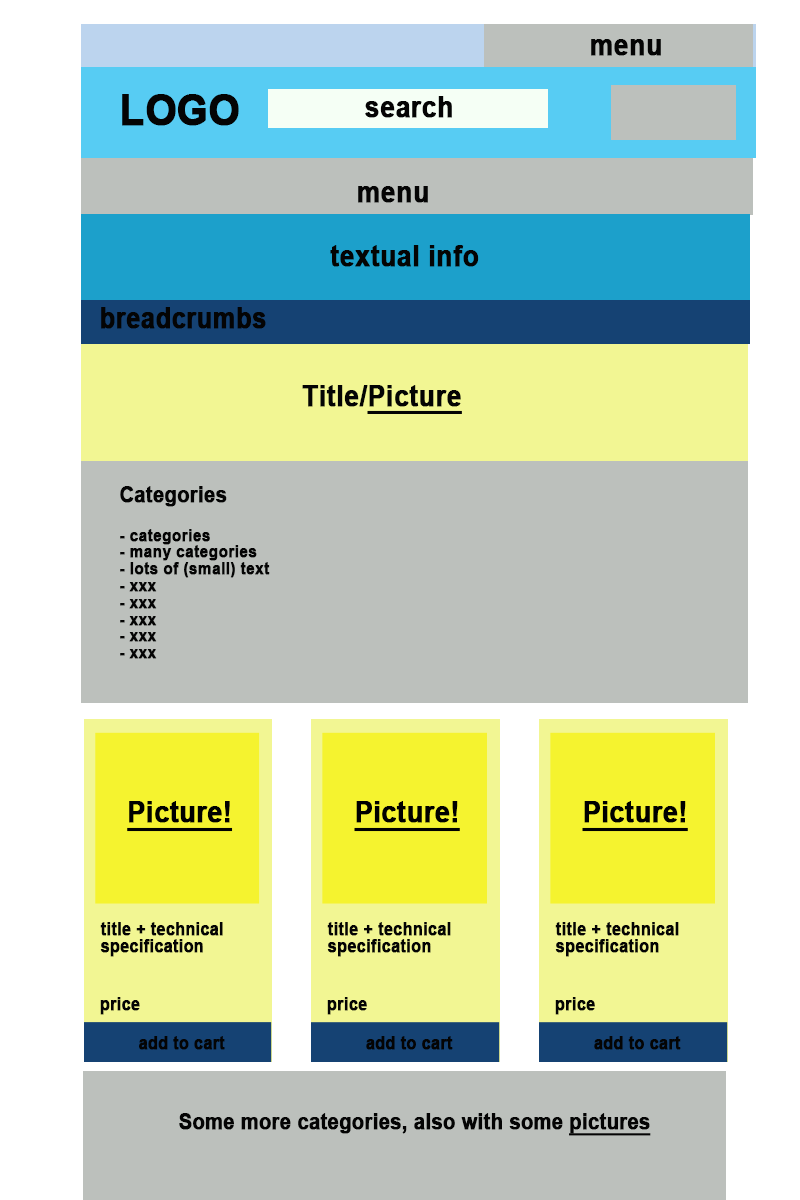
<style>
.page{position:relative;width:800px;height:1200px;background:#bcc0bc}
.page>*{position:absolute;margin:0}
.t1{font:28.8px "Arial-BoldMT";color:#040404;font-weight:bold;scale:0.92 1}
.t2{font:43.2px "Arial-BoldMT";color:#040404;font-weight:bold;scale:0.92 1}
.t3{font:28.9px "Arial-BoldMT";color:#040404;font-weight:bold;scale:0.87 1}
.t4{font:28.8px "Arial-BoldMT";color:#040404;font-weight:bold;text-decoration:underline;scale:0.92 1}
.t5{font:16.8px "Arial-BoldMT";color:#040404;font-weight:bold;scale:0.92 1}
.t6{font:21.6px "Arial-BoldMT";color:#040404;font-weight:bold;scale:0.92 1}
.t7{font:29.3px "Arial-BoldMT";color:#000000;font-weight:bold;text-decoration:underline;scale:0.91 1}
.t8{font:17.6px "Arial-BoldMT";color:#040404;font-weight:bold;scale:0.91 1}
.t9{font:21.6px "Arial-BoldMT";color:#040404;font-weight:bold;text-decoration:underline;scale:0.92 1}
</style>
<div class="page">
<p class="t1" style="left:591px;top:39px;width:70px;height:17px">menu</p>
<p class="t2" style="left:122px;top:94px;width:117px;height:32px">LOGO</p>
<p class="t1" style="left:365px;top:96px;width:87px;height:22px">search</p>
<p class="t1" style="left:358px;top:186px;width:70px;height:17px">menu</p>
<p class="t1" style="left:330px;top:245px;width:149px;height:22px">textual info</p>
<p class="t3" style="left:101px;top:307px;width:165px;height:22px">breadcrumbs</p>
<p class="t4" style="left:302px;top:385px;width:160px;height:29px"><span class="t1">Title/</span>Picture</p>
<p class="t5" style="left:120px;top:486px;width:150px;height:173px"><span class="t6">Categories<br><br></span>- categories<br>- many categories<br>- lots of (small) text<br>- xxx<br>- xxx<br>- xxx<br>- xxx<br>- xxx</p>
<p class="t7" style="left:127px;top:801px;width:106px;height:31px">Picture!</p>
<p class="t7" style="left:354px;top:801px;width:106px;height:31px">Picture!</p>
<p class="t7" style="left:582px;top:801px;width:106px;height:31px">Picture!</p>
<p class="t8" style="left:100px;top:922px;width:123px;height:35px">title + technical<br>specification</p>
<p class="t8" style="left:327px;top:922px;width:124px;height:35px">title + technical<br>specification</p>
<p class="t8" style="left:555px;top:922px;width:124px;height:35px">title + technical<br>specification</p>
<p class="t8" style="left:100px;top:997px;width:40px;height:18px">price</p>
<p class="t8" style="left:327px;top:997px;width:40px;height:18px">price</p>
<p class="t8" style="left:555px;top:997px;width:40px;height:18px">price</p>
<p class="t8" style="left:139px;top:1036px;width:86px;height:14px">add to cart</p>
<p class="t8" style="left:366px;top:1036px;width:87px;height:14px">add to cart</p>
<p class="t8" style="left:594px;top:1036px;width:87px;height:14px">add to cart</p>
<p class="t6" style="left:179px;top:1113px;width:472px;height:23px">Some more categories, also with some <span class="t9">pictures</span></p>
</div>
